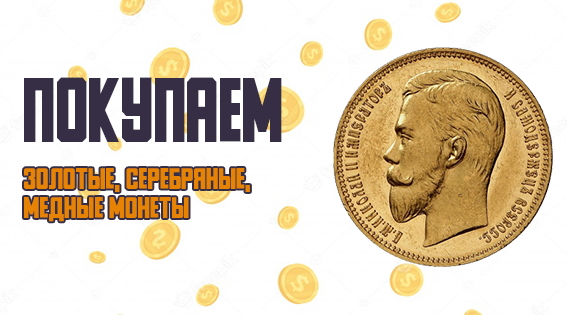
<style>
.page{position:relative;width:570px;height:315px;background:#ffffff}
.page>*{position:absolute;margin:0}
.t1{font:74.3px "PonterX";color:#352e44;scale:0.85 1}
.t2{font:24px "PonterX";color:#e68303}
</style>
<div class="page">
<p class="t1" style="left:24px;top:77px;width:258px;height:65px">Покупаем</p>
<p class="t2" style="left:24px;top:168px;width:226px;height:54px;text-align:right">золотые, серебряные,<br>медные монеты</p>
</div>
